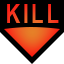
<style>
.page{position:relative;width:64px;height:64px;background:#000000}
.page>*{position:absolute;margin:0}
.t1{font:26.2px "ArialNarrow-Bold";letter-spacing:0.1em;scale:0.96 1}
</style>
<div class="page">
<p class="t1" style="left:7px;top:4px;width:52px;height:19px">KILL</p>
</div>
